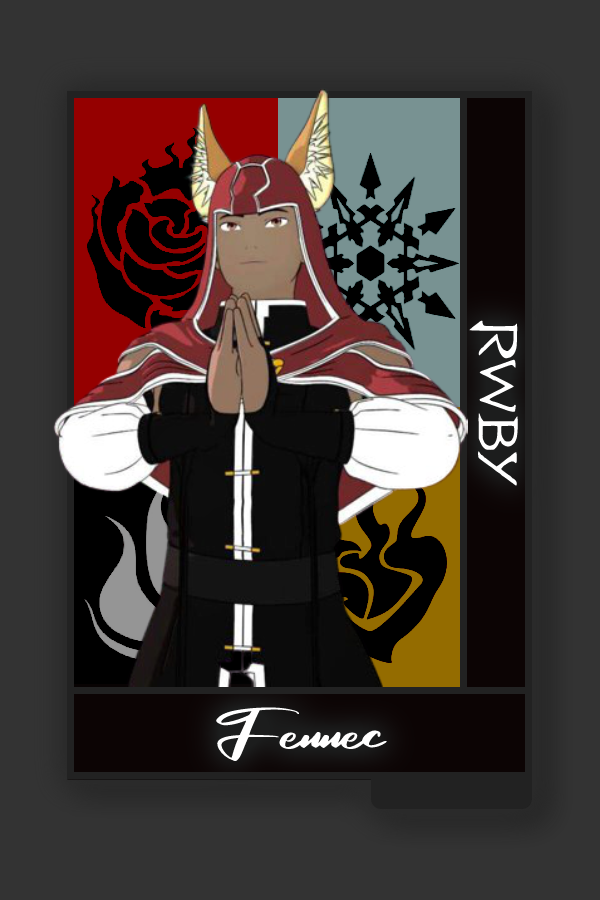
<style>
.page{position:relative;width:600px;height:900px;background:#333333}
.page>*{position:absolute;margin:0}
.t1{font:61.3px "RWBY_Style";color:#ffffff;scale:1.25 1}
.t2{font:75px "RosegaFREE";color:#ffffff}
</style>
<div class="page">
<p class="t1" style="left:469px;top:320px;width:49px;height:166px;rotate:90deg">RWBY</p>
<p class="t2" style="left:215px;top:706px;width:173px;height:56px">Fennec</p>
</div>
